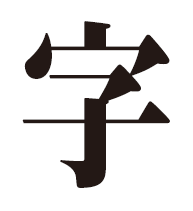
<style>
.page{position:relative;width:193px;height:211px;background:#ffffff}
.page>*{position:absolute;margin:0}
.t1{font:178.5px "KochoStd-Heavy";letter-spacing:0.015em;color:#231815;font-weight:bold;scale:0.88 1}
</style>
<div class="page">
<p class="t1" style="left:22px;top:21px;width:148px;height:167px">字</p>
</div>
